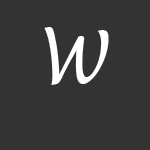
<style>
.page{position:relative;width:150px;height:150px;background:#333333}
.page>*{position:absolute;margin:0}
.t1{font:72px "LucidaHandwriting-Italic";color:#ffffff}
</style>
<div class="page">
<p class="t1" style="left:44px;top:27px;width:65px;height:58px">W</p>
</div>
